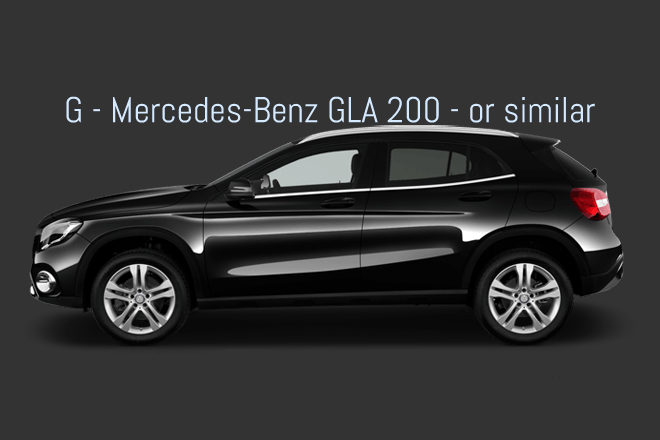
<style>
.page{position:relative;width:660px;height:440px;background:#333333}
.page>*{position:absolute;margin:0}
.t1{font:36px "Abel-Regular";color:#d5e9ff}
</style>
<div class="page">
<p class="t1" style="left:66px;top:96px;width:529px;height:27px">G - Mercedes-Benz GLA 200 - or similar</p>
</div>
